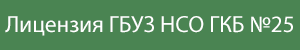
<style>
.page{position:relative;width:300px;height:50px;background:#4a8452}
.page>*{position:absolute;margin:0}
.t1{font:23.3px "MyriadPro-Regular";color:#ffffff}
</style>
<div class="page">
<p class="t1" style="left:5px;top:16px;width:288px;height:20px">Лицензия ГБУЗ НСО ГКБ №25</p>
</div>
